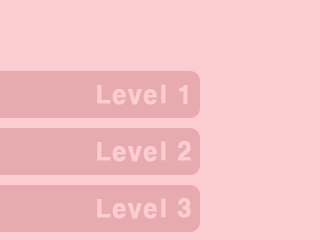
<style>
.page{position:relative;width:320px;height:240px;background:#fbcdd0}
.page>*{position:absolute;margin:0}
.t1{font:24px "H2gtrE";color:#fbcdd0;font-weight:bold}
</style>
<div class="page">
<p class="t1" style="left:97px;top:84px;width:91px;height:21px">Level 1</p>
<p class="t1" style="left:97px;top:141px;width:94px;height:21px">Level 2</p>
<p class="t1" style="left:97px;top:198px;width:94px;height:21px">Level 3</p>
</div>
